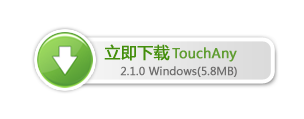
<style>
.page{position:relative;width:304px;height:119px;background:#ffffff}
.page>*{position:absolute;margin:0}
.t1{font:16px "MicrosoftYaHei";letter-spacing:-0.01em;color:#438e0b;font-weight:bold}
.t2{font:13.3px "MicrosoftYaHei";letter-spacing:-0.01em;color:#609d32;font-weight:bold}
.t3{font:10.7px "MicrosoftYaHei";letter-spacing:-0.01em;color:#6e6d6d;font-weight:bold}
</style>
<div class="page">
<p class="t1" style="left:104px;top:44px;width:66px;height:17px">立即下载</p>
<p class="t2" style="left:172px;top:47px;width:65px;height:15px">TouchAny</p>
<p class="t3" style="left:120px;top:66px;width:117px;height:11px">2.1.0 Windows(5.8MB)</p>
</div>
